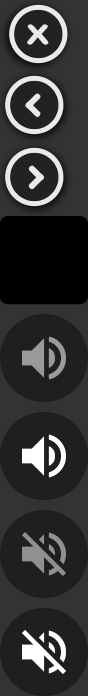
<style>
.page{position:relative;width:88px;height:696px;background:#1f1f1f}
.page>*{position:absolute;margin:0}
.t1{font:37.1px "ArialRoundedMTBold";color:#eaeaea;scale:1.21 1}
</style>
<div class="page">
<p class="t1" style="left:27px;top:24px;width:22px;height:21px">x</p>
</div>
